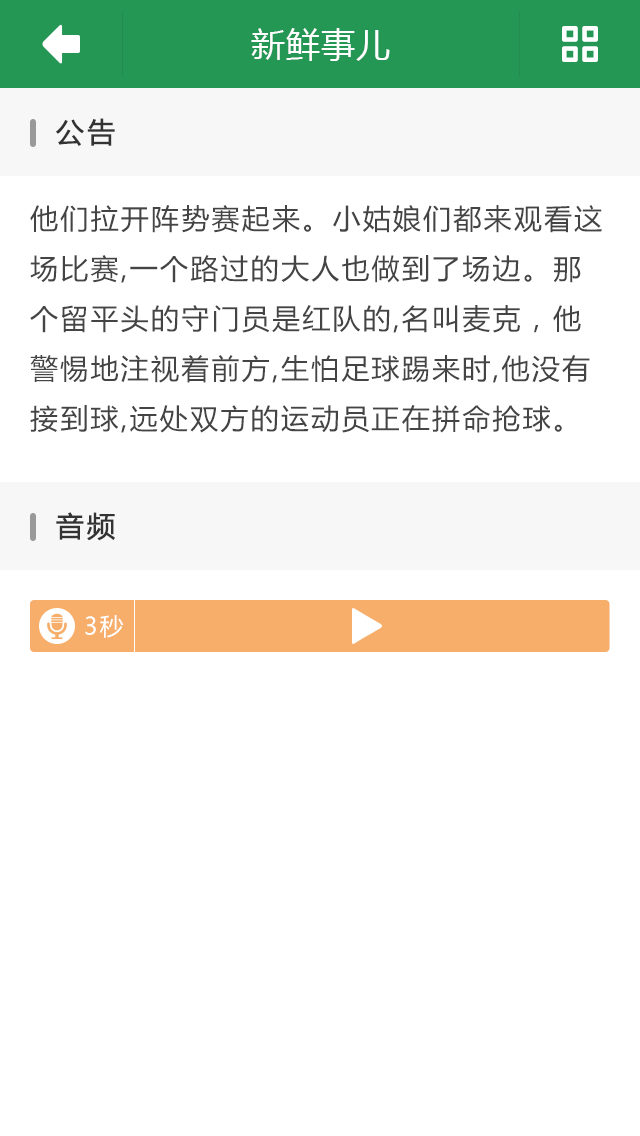
<style>
.page{position:relative;width:640px;height:1136px;background:#ffffff}
.page>*{position:absolute;margin:0}
.t1{font:28px "MicrosoftYaHei";letter-spacing:0.08em;color:#333333;font-weight:bold}
.t2{font:28px/50px "MicrosoftYaHei";letter-spacing:0.08em;color:#444444}
.t3{font:24px "MicrosoftYaHei";letter-spacing:0.08em;color:#ffffff}
</style>
<div class="page">
<p class="t1" style="left:56px;top:118px;width:59px;height:28px">公告</p>
<p class="t2" style="left:30px;top:205px;width:572px;height:228px">他们拉开阵势赛起来。小姑娘们都来观看这场比赛,一个路过的大人也做到了场边。那个留平头的守门员是红队的,名叫麦克，他警惕地注视着前方,生怕足球踢来时,他没有接到球,远处双方的运动员正在拼命抢球。</p>
<p class="t1" style="left:56px;top:512px;width:59px;height:29px">音频</p>
<p class="t3" style="left:85px;top:615px;width:39px;height:23px">3秒</p>
</div>
